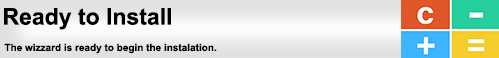
<style>
.page{position:relative;width:499px;height:58px}
.page>*{position:absolute;margin:0}
.t1{font:10px "Arial-BoldMT";color:#000000}
.t2{font:3px "Arial-BoldMT";color:#000000}
.t3{font:23px "Arial-BoldMT";color:#000000}
.t4{font:12px "ArialMT";color:#000000}
</style>
<div class="page">
<p class="t1" style="left:4px;top:8px;width:213px;height:46px"><span class="t2"> </span><span class="t3">Ready to Install<br></span><span class="t4"><br></span> The wizzard is ready to begin the instalation.</p>
</div>
